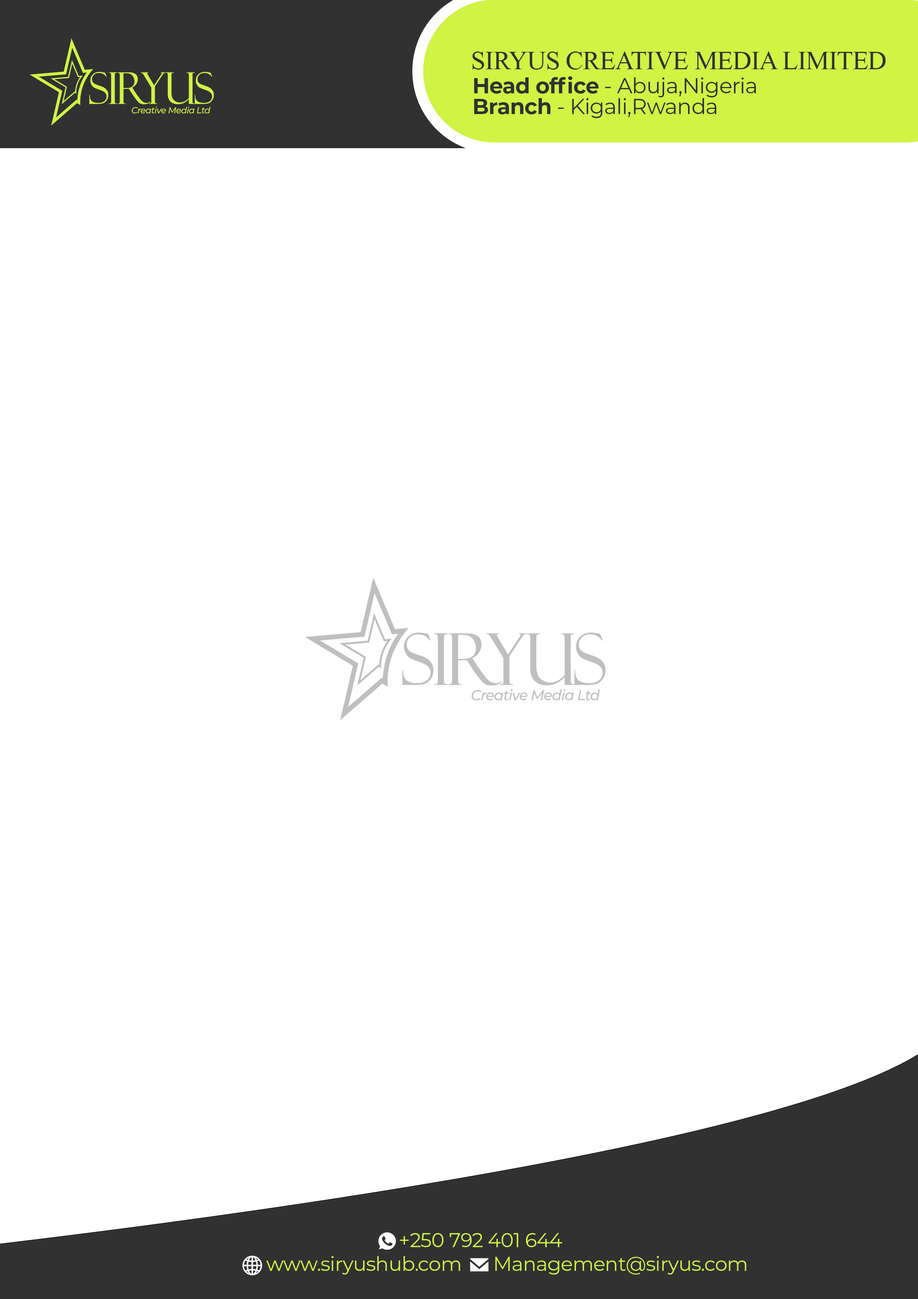
<style>
.page{position:relative;width:918px;height:1299px;background:#ffffff}
.page>*{position:absolute;margin:0}
.t1{font:26.2px "MongolianBaiti";letter-spacing:-0.02em;color:#313131}
.t2{font:21.6px "Montserrat-Regular";letter-spacing:-0.02em;color:#313131}
.t3{font:21.6px "Montserrat-Bold";letter-spacing:-0.02em;color:#313131;text-transform:uppercase}
.t4{font:21.6px "Montserrat-Bold";letter-spacing:-0.02em;color:#313131}
.t5{font:19.9px "Montserrat-Regular";letter-spacing:-0.02em;color:#d0f344}
</style>
<div class="page">
<p class="t1" style="left:472px;top:51px;width:414px;height:19px">SIRYUS CREATIVE MEDIA LIMITED</p>
<p class="t2" style="left:474px;top:76px;width:282px;height:21px"><span class="t3">H</span><span class="t4">ead office</span> - Abuja,Nigeria</p>
<p class="t2" style="left:474px;top:98px;width:242px;height:20px"><span class="t3">b</span><span class="t4">ranch </span>- Kigali,Rwanda</p>
<p class="t5" style="left:400px;top:1233px;width:162px;height:14px">+250 792 401 644</p>
<p class="t5" style="left:266px;top:1256px;width:194px;height:18px">www.siryushub.com</p>
<p class="t5" style="left:495px;top:1256px;width:251px;height:18px">Management@siryus.com</p>
</div>
